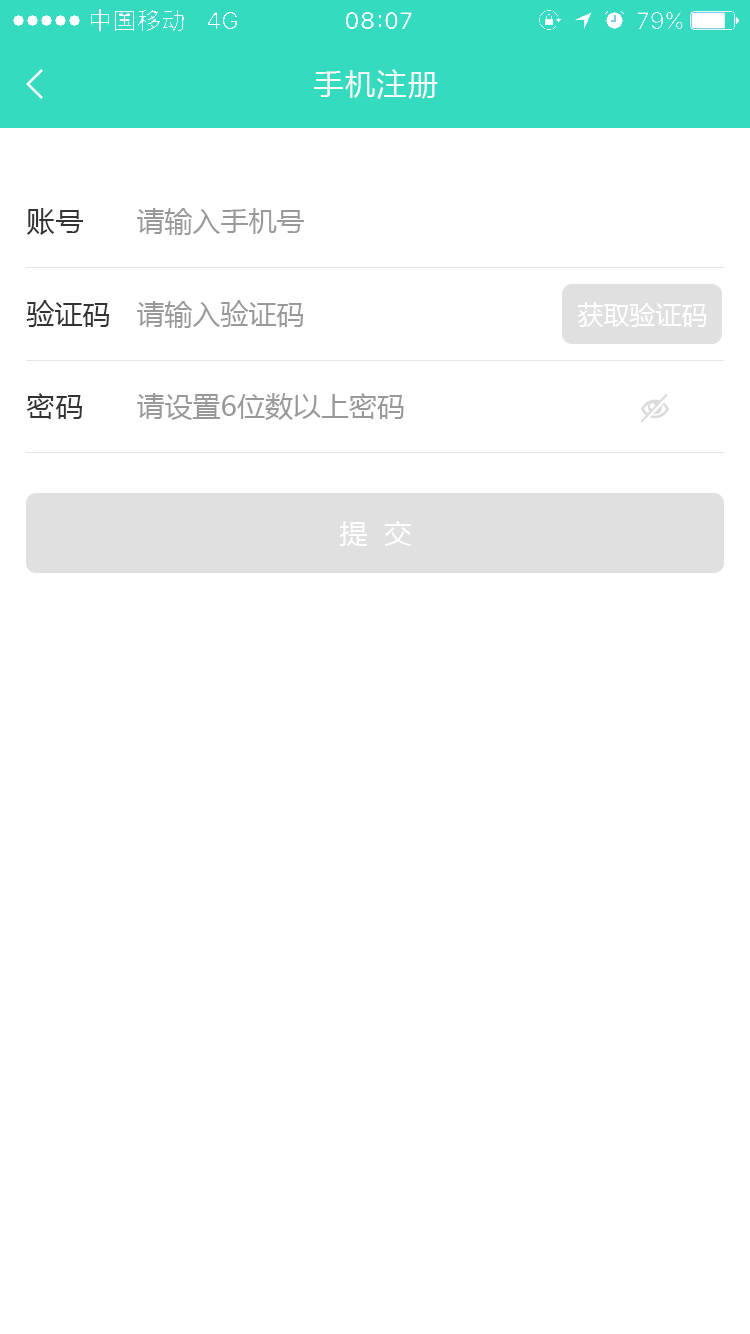
<style>
.page{position:relative;width:750px;height:1334px;background:#ffffff}
.page>*{position:absolute;margin:0}
.t1{font:30px "MicrosoftYaHei";letter-spacing:0.05em;color:#fafafa}
.t2{font:28px "MicrosoftYaHei";letter-spacing:0.05em;color:#333333}
.t3{font:28px "MicrosoftYaHei";color:#999999}
.t4{font:28px "MicrosoftYaHei";color:#333333}
.t5{font:26px "MicrosoftYaHei";color:#ffffff}
.t6{font:28px "MicrosoftYaHei";color:#ffffff}
</style>
<div class="page">
<p class="t1" style="left:314px;top:69px;width:124px;height:30px">手机注册</p>
<p class="t2" style="left:26px;top:208px;width:57px;height:27px">账号</p>
<p class="t3" style="left:137px;top:208px;width:167px;height:27px">请输入手机号</p>
<p class="t4" style="left:26px;top:300px;width:83px;height:27px">验证码</p>
<p class="t3" style="left:137px;top:300px;width:166px;height:28px">请输入验证码</p>
<p class="t5" style="left:577px;top:302px;width:130px;height:25px">获取验证码</p>
<p class="t2" style="left:26px;top:393px;width:56px;height:26px">密码</p>
<p class="t3" style="left:137px;top:393px;width:267px;height:27px">请设置6位数以上密码</p>
<p class="t6" style="left:339px;top:521px;width:73px;height:25px">提  交</p>
</div>
